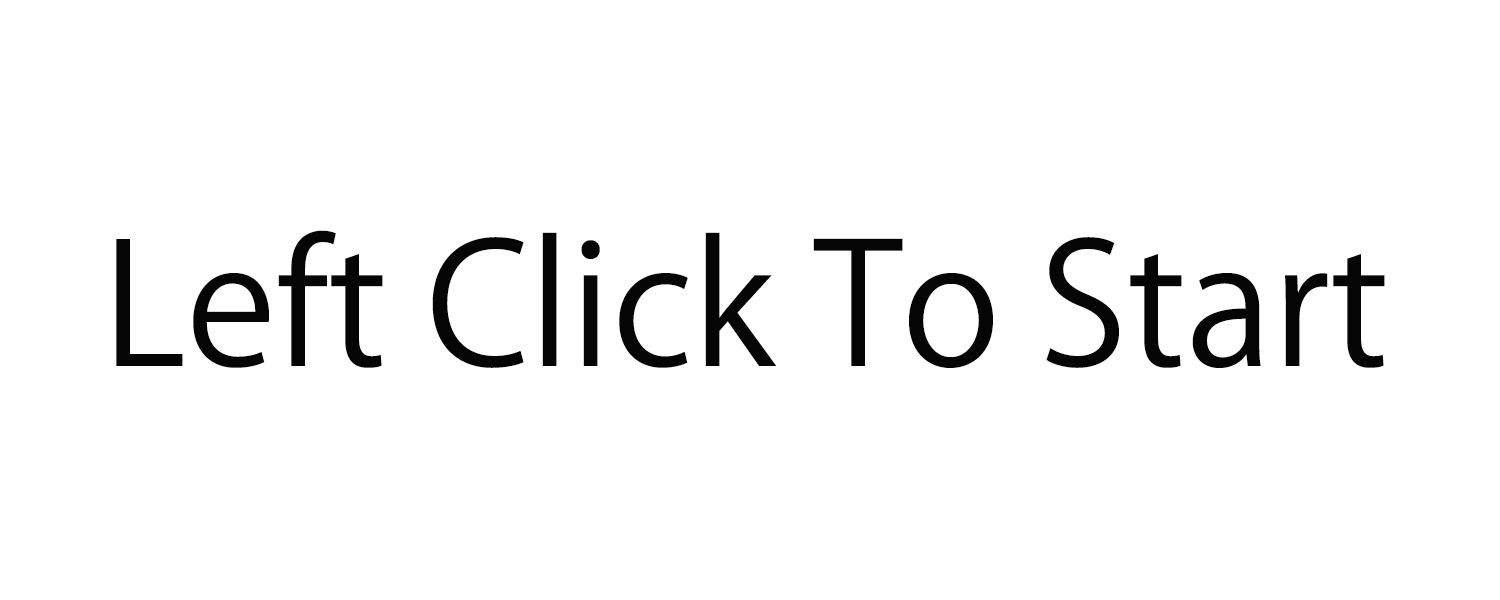
<style>
.page{position:relative;width:1500px;height:600px;background:#ffffff}
.page>*{position:absolute;margin:0}
.t1{font:166.7px "KozGoPr6N-Regular";color:#050505}
</style>
<div class="page">
<p class="t1" style="left:116px;top:230px;width:1269px;height:138px">Left Click To Start</p>
</div>
